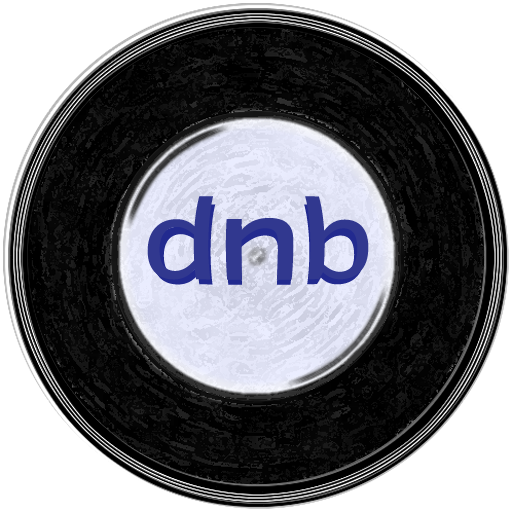
<style>
.page{position:relative;width:512px;height:512px;background:#ffffff}
.page>*{position:absolute;margin:0}
.t1{font:102.8px "LucidaConsole";letter-spacing:-0.05em;color:#31388f;scale:1.33 1}
.t2{font:98.7px "LucidaConsole";letter-spacing:-0.05em;color:#222a8f;scale:1.33 1}
</style>
<div class="page">
<p class="t1" style="left:147px;top:196px;width:222px;height:84px">dnb</p>
<p class="t2" style="left:152px;top:204px;width:213px;height:81px">dnb</p>
</div>
